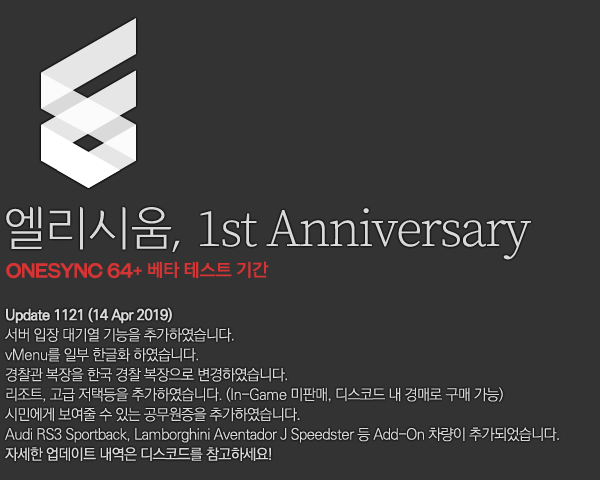
<style>
.page{position:relative;width:600px;height:480px;background:#333333}
.page>*{position:absolute;margin:0}
.t1{font:52.6px "SourceSerifRoman-Light";letter-spacing:-0.04em;color:#d9d9d9}
.t2{font:52.6px "YiSunShinDotumL";letter-spacing:-0.036em;color:#d9d9d9}
.t3{font:20px "GalderglynnTitlingRg-Regular";letter-spacing:-0.036em;color:#d43434}
.t4{font:20px "YiSunShinDotumM";letter-spacing:-0.036em;color:#d43434}
.t5{font:15px/19.9px "KoPubDotumLight";letter-spacing:-0.045em;color:#d9d9d9}
.t6{font:15px/19.9px "KoPubDotumBold";letter-spacing:-0.045em;color:#d9d9d9}
.t7{font:15px/19.9px "KoPubDotumMedium";letter-spacing:-0.045em;color:#d9d9d9}
</style>
<div class="page">
<p class="t1" style="left:6px;top:206px;width:525px;height:54px"><span class="t2">엘리시움, </span>1st Anniversary</p>
<p class="t3" style="left:6px;top:261px;width:263px;height:18px">OneSync 64+ <span class="t4">베타 테스트 기간</span></p>
<p class="t5" style="left:5px;top:307px;width:554px;height:154px"><span class="t6">Update 1121 (14 Apr 2019)<br></span>서버 입장 대기열 기능을 추가하였습니다.<br>vMenu를 일부 한글화 하였습니다.<br>경찰관 복장을 한국 경찰 복장으로 변경하였습니다.<br>리조트, 고급 저택등을 추가하였습니다. (In-Game 미판매, 디스코드 내 경매로 구매 가능)<br>시민에게 보여줄 수 있는 공무원증을 추가하였습니다.<br>Audi RS3 Sportback, Lamborghini Aventador J Speedster 등 Add-On 차량이 추가되었습니다.<br><span class="t7">자세한 업데이트 내역은 디스코드를 참고하세요!</span></p>
</div>
